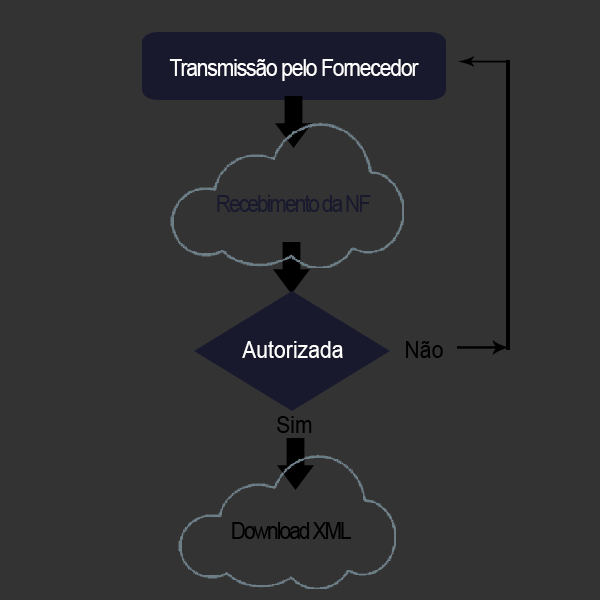
<style>
.page{position:relative;width:600px;height:600px;background:#333333}
.page>*{position:absolute;margin:0}
.t1{font:22.7px "ArialMT";letter-spacing:-0.06em;color:#ffffff;scale:0.94 1}
.t2{font:22.7px "ArialMT";letter-spacing:-0.1em;color:#18192d;scale:0.94 1}
.t3{font:22.8px "ArialMT";color:#ffffff;scale:0.93 1}
.t4{font:22.7px "ArialMT";color:#000000;scale:0.94 1}
.t5{font:22.7px "ArialMT";letter-spacing:-0.1em;color:#000000;scale:0.94 1}
</style>
<div class="page">
<p class="t1" style="left:169px;top:59px;width:250px;height:22px">Transmissão pelo Fornecedor</p>
<p class="t2" style="left:217px;top:195px;width:154px;height:17px">Recebimento da NF</p>
<p class="t3" style="left:242px;top:341px;width:101px;height:17px">Autorizada</p>
<p class="t4" style="left:406px;top:341px;width:37px;height:17px">Não</p>
<p class="t4" style="left:277px;top:416px;width:35px;height:17px">Sim</p>
<p class="t5" style="left:232px;top:522px;width:120px;height:17px">Download XML</p>
</div>
